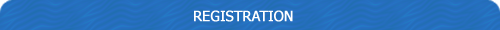
<style>
.page{position:relative;width:500px;height:30px}
.page>*{position:absolute;margin:0}
.t1{font:14px "Tahoma";color:#ffffff;font-weight:bold}
</style>
<div class="page">
<p class="t1" style="left:194px;top:10px;width:99px;height:12px">REGISTRATION</p>
</div>
